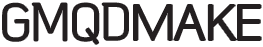
<style>
.page{position:relative;width:263px;height:47px;background:#ffffff}
.page>*{position:absolute;margin:0}
.t1{font:48.6px "VITRO-PRIDE-OTF";color:#231f20}
.t2{font:44.2px "AppleGothic";color:#231f20;scale:1.03 1}
</style>
<div class="page">
<p class="t1" style="left:3px;top:3px;width:125px;height:41px">GMQD</p>
<p class="t2" style="left:134px;top:5px;width:127px;height:35px">MAKE</p>
</div>
